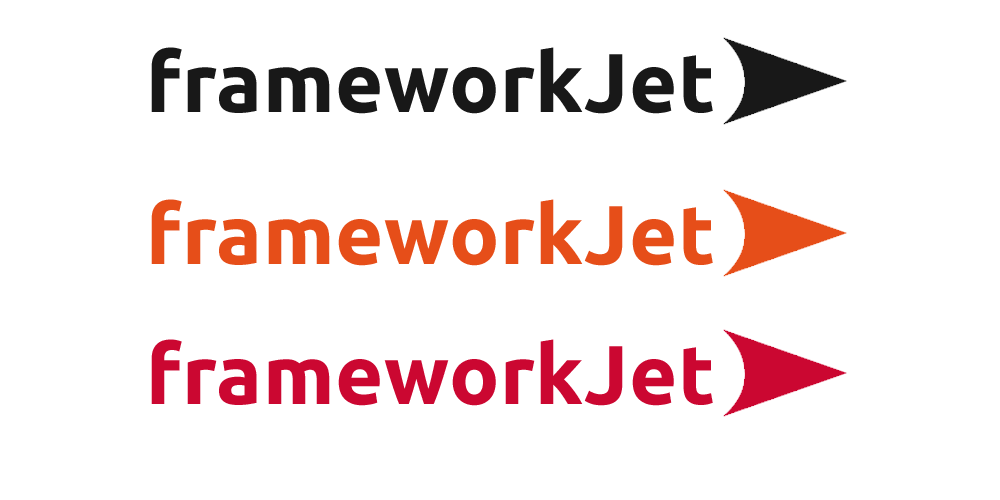
<style>
.page{position:relative;width:1000px;height:500px;background:#ffffff}
.page>*{position:absolute;margin:0}
.t1{font:83.3px "Ubuntu-Bold";letter-spacing:0.005em;color:#181818}
.t2{font:83.3px "Ubuntu-Bold";letter-spacing:0.005em;color:#e64e19}
.t3{font:83.3px "Ubuntu-Bold";letter-spacing:0.005em;color:#cb0731}
</style>
<div class="page">
<p class="t1" style="left:151px;top:47px;width:562px;height:67px">frameworkJet</p>
<p class="t2" style="left:151px;top:199px;width:562px;height:67px">frameworkJet</p>
<p class="t3" style="left:151px;top:339px;width:562px;height:67px">frameworkJet</p>
</div>
